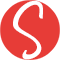
<style>
.page{position:relative;width:60px;height:60px;background:#e73c37}
.page>*{position:absolute;margin:0}
.t1{font:56px "AdindaMelia-regular";color:#ffffff;text-transform:uppercase;font-weight:bold}
</style>
<div class="page">
<p class="t1" style="left:13px;top:1px;width:30px;height:59px">S</p>
</div>
